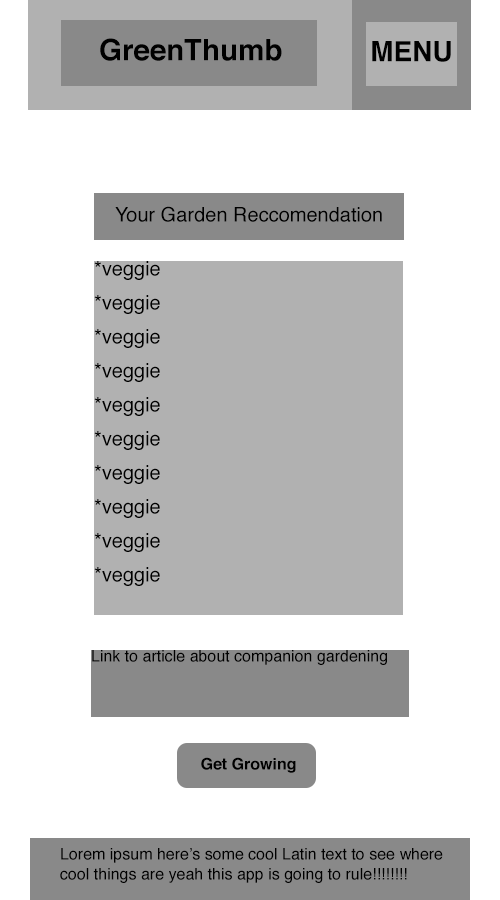
<style>
.page{position:relative;width:500px;height:900px;background:#ffffff}
.page>*{position:absolute;margin:0}
.t1{font:29.5px "Helvetica-Bold";color:#000000}
.t2{font:28px "Helvetica-Bold";color:#000000}
.t3{font:20px "Helvetica";color:#000000}
.t4{font:20px/34px "Helvetica";color:#000000}
.t5{font:16px "Helvetica";color:#000000}
.t6{font:16px "Helvetica-Bold";color:#000000}
.t7{font:16px/20px "Helvetica";color:#000000}
</style>
<div class="page">
<p class="t1" style="left:100px;top:38px;width:182px;height:23px">GreenThumb</p>
<p class="t2" style="left:372px;top:41px;width:79px;height:21px">MENU</p>
<p class="t3" style="left:115px;top:206px;width:267px;height:16px">Your Garden Reccomendation</p>
<p class="t4" style="left:94px;top:261px;width:66px;height:325px">*veggie<br>*veggie<br>*veggie<br>*veggie<br>*veggie<br>*veggie<br>*veggie<br>*veggie<br>*veggie<br>*veggie</p>
<p class="t5" style="left:92px;top:650px;width:295px;height:15px">Link to article about companion gardening</p>
<p class="t6" style="left:201px;top:757px;width:95px;height:16px">Get Growing</p>
<p class="t7" style="left:60px;top:848px;width:383px;height:35px">Lorem ipsum here’s some cool Latin text to see where cool things are yeah this app is going to rule!!!!!!!!</p>
</div>
